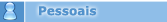
<style>
.page{position:relative;width:167px;height:22px;background:#8fbee8}
.page>*{position:absolute;margin:0}
.t1{font:12px "Verdana-Bold";color:#5292cc}
</style>
<div class="page">
<p class="t1" style="left:39px;top:6px;width:58px;height:10px">Pessoais</p>
</div>
